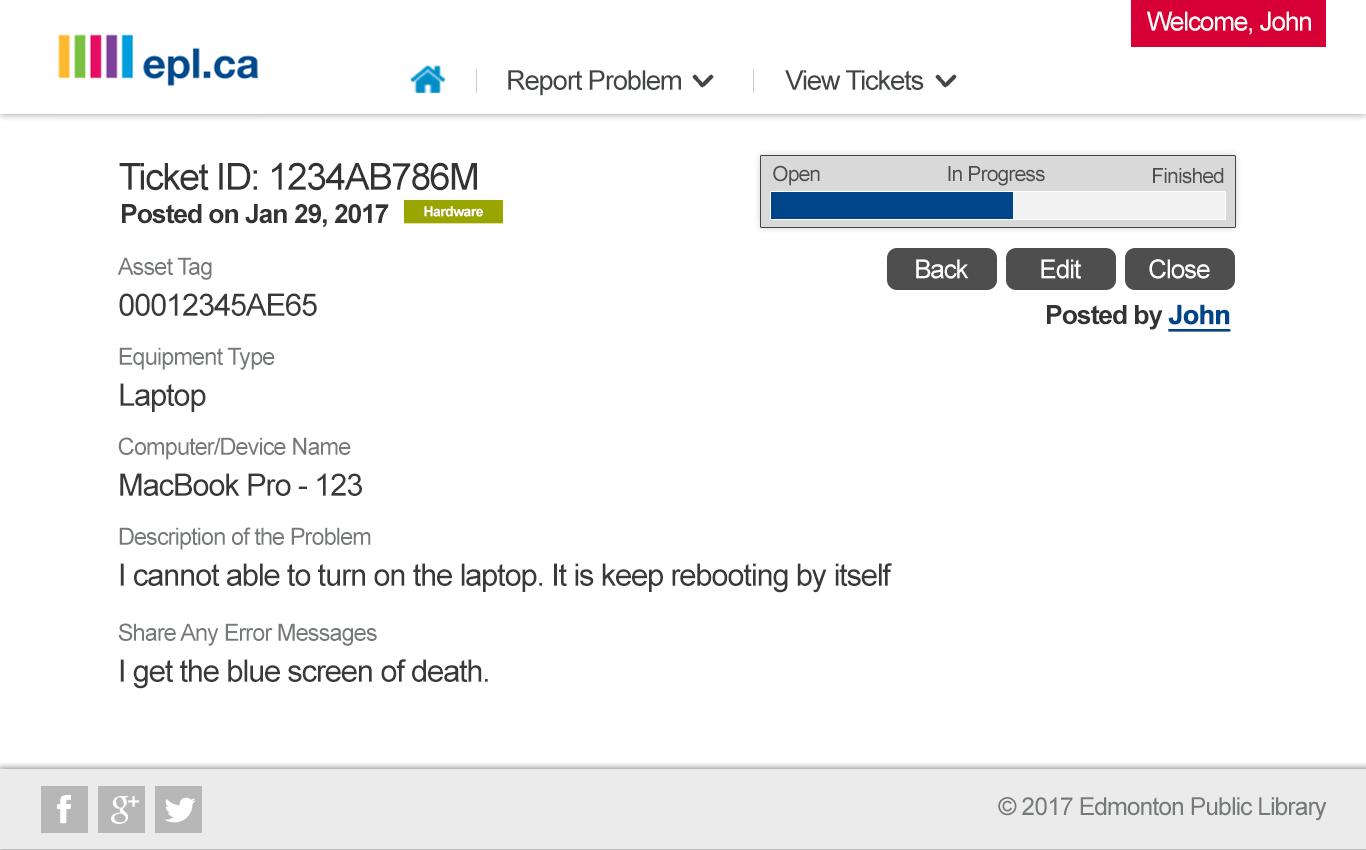
<style>
.page{position:relative;width:1366px;height:850px;background:#ffffff}
.page>*{position:absolute;margin:0}
.t1{font:26px "ArialMT";letter-spacing:-0.04em;color:#ffffff}
.t2{font:27.3px "ArialMT";letter-spacing:-0.04em;color:#414546}
.t3{font:37.2px "ArialMT";letter-spacing:-0.04em;color:#333333}
.t4{font:21px "ArialMT";letter-spacing:-0.04em;color:#4e4e4e}
.t5{font:26.5px "Arial-BoldMT";letter-spacing:-0.04em;color:#333333}
.t6{font:14px "Arial-BoldMT";letter-spacing:-0.04em;color:#ffffff}
.t7{font:23.6px "ArialMT";letter-spacing:-0.04em;color:#767979}
.t8{font:31px "ArialMT";letter-spacing:-0.04em;color:#393939}
.t9{font:26.5px "Arial-BoldMT";letter-spacing:-0.04em;color:#004589;font-weight:bold;text-decoration:underline}
.t10{font:24.8px "ArialMT";letter-spacing:-0.04em;color:#767979}
</style>
<div class="page">
<p class="t1" style="left:1147px;top:11px;width:164px;height:24px">Welcome, John</p>
<p class="t2" style="left:508px;top:70px;width:173px;height:26px">Report Problem</p>
<p class="t2" style="left:785px;top:70px;width:139px;height:20px">View Tickets</p>
<p class="t3" style="left:119px;top:162px;width:358px;height:29px">Ticket ID: 1234AB786M</p>
<p class="t4" style="left:773px;top:165px;width:47px;height:21px">Open</p>
<p class="t4" style="left:948px;top:166px;width:97px;height:20px">In Progress</p>
<p class="t4" style="left:1153px;top:168px;width:71px;height:16px">Finished</p>
<p class="t5" style="left:122px;top:204px;width:267px;height:24px">Posted on Jan 29, 2017</p>
<p class="t6" style="left:424px;top:206px;width:59px;height:11px">Hardware</p>
<p class="t7" style="left:117px;top:257px;width:95px;height:23px">Asset Tag</p>
<p class="t1" style="left:916px;top:259px;width:53px;height:20px">Back</p>
<p class="t1" style="left:1041px;top:259px;width:40px;height:20px">Edit</p>
<p class="t1" style="left:1149px;top:259px;width:61px;height:20px">Close</p>
<p class="t8" style="left:119px;top:293px;width:198px;height:23px">00012345AE65</p>
<p class="t5" style="left:1047px;top:304px;width:184px;height:28px">Posted by <span class="t9">John</span></p>
<p class="t7" style="left:119px;top:347px;width:156px;height:23px">Equipment Type</p>
<p class="t8" style="left:120px;top:383px;width:86px;height:29px">Laptop</p>
<p class="t7" style="left:118px;top:437px;width:233px;height:23px">Computer/Device Name</p>
<p class="t8" style="left:120px;top:473px;width:242px;height:23px">MacBook Pro - 123</p>
<p class="t7" style="left:119px;top:527px;width:252px;height:23px">Description of the Problem</p>
<p class="t8" style="left:120px;top:563px;width:772px;height:30px">I cannot able to turn on the laptop. It is keep rebooting by itself</p>
<p class="t7" style="left:118px;top:623px;width:259px;height:23px">Share Any Error Messages</p>
<p class="t8" style="left:120px;top:659px;width:368px;height:30px">I get the blue screen of death.</p>
<p class="t10" style="left:998px;top:797px;width:329px;height:24px">© 2017 Edmonton Public Library</p>
</div>
